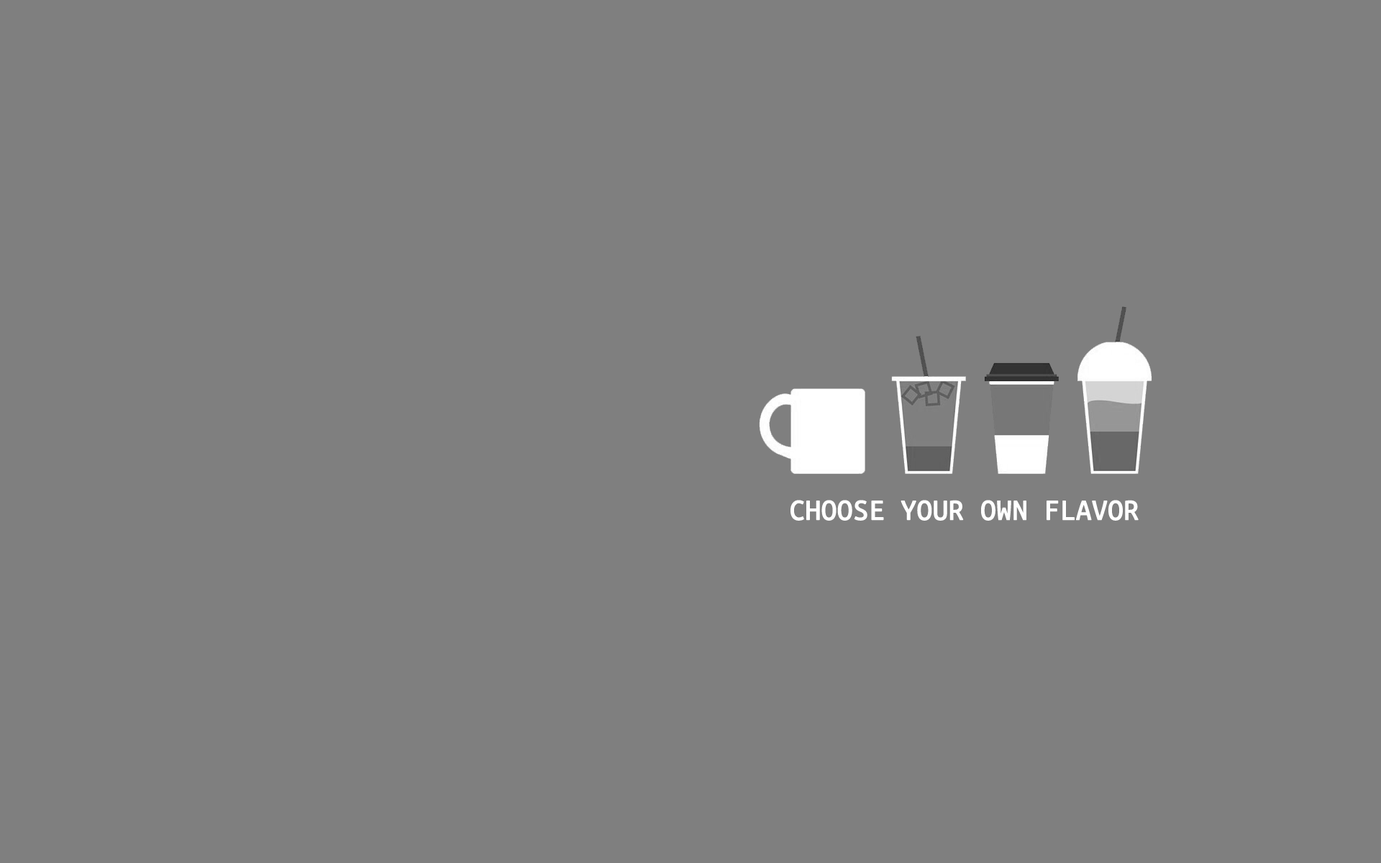
<style>
.page{position:relative;width:1381px;height:863px;background:#7f7f7f}
.page>*{position:absolute;margin:0}
.t1{font:30.2px "UbuntuMonoDerivativePowerline-Regular";color:#ffffff;font-weight:bold}
</style>
<div class="page">
<p class="t1" style="left:791px;top:500px;width:348px;height:21px">CHOOSE YOUR OWN FLAVOR</p>
</div>
